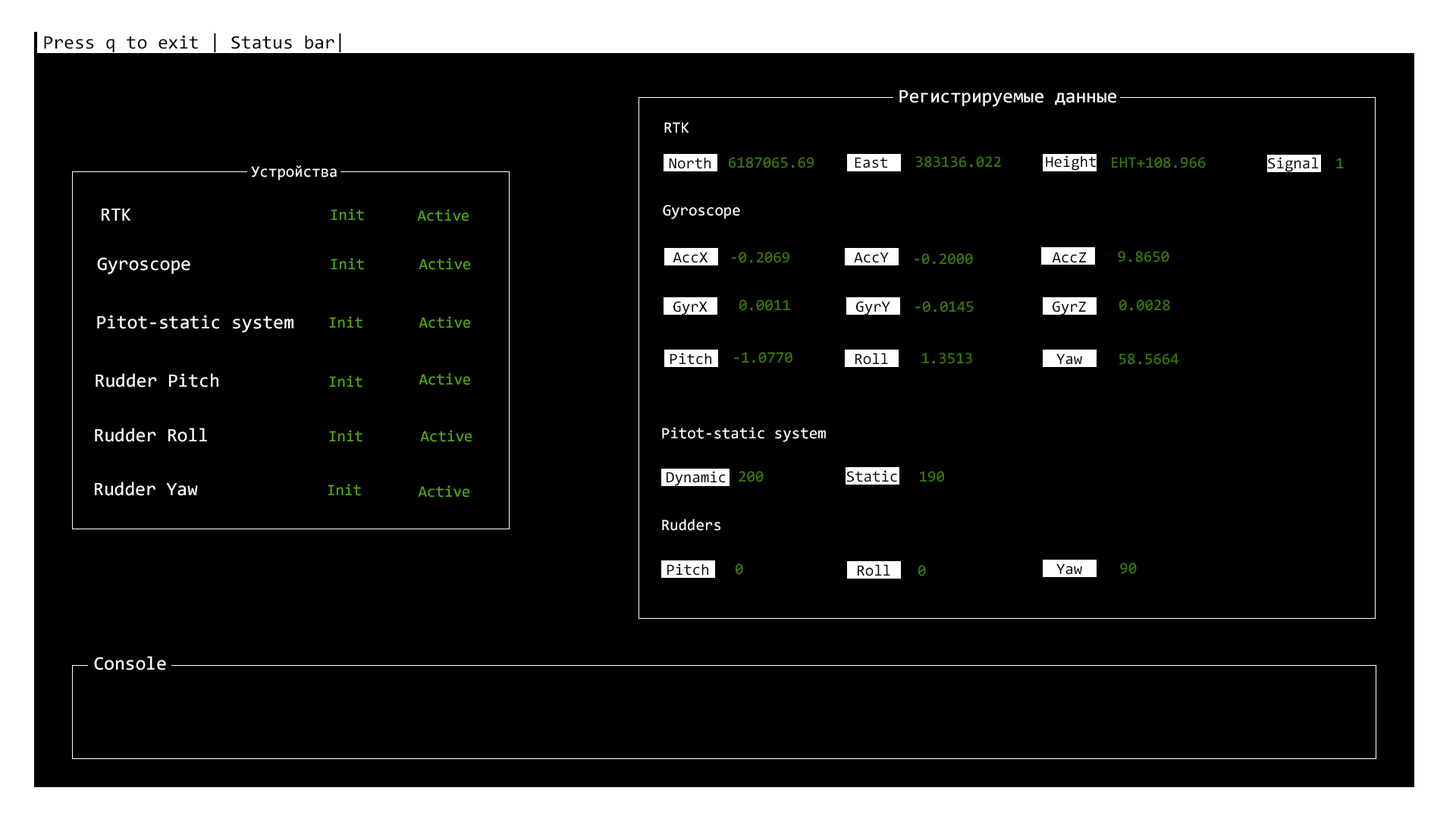
<style>
.page{position:relative;width:1456px;height:819px;background:#000000}
.page>*{position:absolute;margin:0}
.t1{font:19px "Consolas";color:#000000}
.t2{font:19px "Consolas";color:#ffffff}
.t3{font:15.8px "Consolas";color:#ffffff}
.t4{font:15.8px "Consolas";color:#000000}
.t5{font:15.8px "Consolas";color:#397a0a}
.t6{font:15.8px "Consolas";color:#51ac0e}
</style>
<div class="page">
<p class="t1" style="left:44px;top:33px;width:297px;height:19px">Press q to exit | Status bar|</p>
<p class="t2" style="left:899px;top:90px;width:217px;height:17px">Регистрируемые данные</p>
<p class="t3" style="left:664px;top:122px;width:25px;height:11px">RTK</p>
<p class="t4" style="left:669px;top:157px;width:42px;height:12px">North</p>
<p class="t5" style="left:729px;top:157px;width:85px;height:11px">6187065.69</p>
<p class="t4" style="left:855px;top:157px;width:32px;height:11px">East</p>
<p class="t5" style="left:916px;top:156px;width:85px;height:12px">383136.022</p>
<p class="t4" style="left:1046px;top:155px;width:51px;height:16px">Height</p>
<p class="t5" style="left:1112px;top:157px;width:94px;height:11px">EHT+108.966</p>
<p class="t4" style="left:1268px;top:157px;width:51px;height:15px">Signal</p>
<p class="t5" style="left:1336px;top:158px;width:8px;height:10px">1</p>
<p class="t3" style="left:251px;top:165px;width:86px;height:15px">Устройства</p>
<p class="t2" style="left:102px;top:209px;width:29px;height:12px">RTK</p>
<p class="t6" style="left:331px;top:209px;width:33px;height:12px">Init</p>
<p class="t6" style="left:417px;top:209px;width:52px;height:12px">Active</p>
<p class="t3" style="left:663px;top:205px;width:77px;height:14px">Gyroscope</p>
<p class="t2" style="left:97px;top:257px;width:93px;height:18px">Gyroscope</p>
<p class="t6" style="left:331px;top:258px;width:33px;height:12px">Init</p>
<p class="t6" style="left:419px;top:258px;width:51px;height:12px">Active</p>
<p class="t4" style="left:673px;top:252px;width:35px;height:11px">AccX</p>
<p class="t5" style="left:731px;top:252px;width:58px;height:11px">-0.2069</p>
<p class="t4" style="left:854px;top:252px;width:35px;height:11px">AccY</p>
<p class="t5" style="left:915px;top:253px;width:58px;height:12px">-0.2000</p>
<p class="t4" style="left:1052px;top:252px;width:34px;height:11px">AccZ</p>
<p class="t5" style="left:1118px;top:251px;width:51px;height:11px">9.8650</p>
<p class="t4" style="left:673px;top:301px;width:35px;height:14px">GyrX</p>
<p class="t5" style="left:739px;top:300px;width:51px;height:11px">0.0011</p>
<p class="t4" style="left:856px;top:301px;width:34px;height:14px">GyrY</p>
<p class="t5" style="left:915px;top:301px;width:59px;height:11px">-0.0145</p>
<p class="t4" style="left:1053px;top:301px;width:33px;height:14px">GyrZ</p>
<p class="t5" style="left:1119px;top:300px;width:51px;height:11px">0.0028</p>
<p class="t2" style="left:97px;top:315px;width:196px;height:18px">Pitot-static system</p>
<p class="t6" style="left:329px;top:316px;width:33px;height:12px">Init</p>
<p class="t6" style="left:419px;top:316px;width:51px;height:12px">Active</p>
<p class="t4" style="left:670px;top:353px;width:41px;height:12px">Pitch</p>
<p class="t5" style="left:734px;top:352px;width:58px;height:11px">-1.0770</p>
<p class="t4" style="left:855px;top:353px;width:33px;height:12px">Roll</p>
<p class="t5" style="left:921px;top:353px;width:51px;height:11px">1.3513</p>
<p class="t4" style="left:1056px;top:353px;width:26px;height:12px">Yaw</p>
<p class="t5" style="left:1119px;top:353px;width:60px;height:12px">58.5664</p>
<p class="t2" style="left:96px;top:373px;width:122px;height:15px">Rudder Pitch</p>
<p class="t6" style="left:329px;top:375px;width:33px;height:13px">Init</p>
<p class="t6" style="left:419px;top:373px;width:51px;height:12px">Active</p>
<p class="t2" style="left:95px;top:428px;width:112px;height:14px">Rudder Roll</p>
<p class="t6" style="left:329px;top:430px;width:33px;height:12px">Init</p>
<p class="t6" style="left:420px;top:430px;width:52px;height:12px">Active</p>
<p class="t3" style="left:662px;top:427px;width:164px;height:15px">Pitot-static system</p>
<p class="t4" style="left:667px;top:471px;width:59px;height:15px">Dynamic</p>
<p class="t5" style="left:739px;top:471px;width:25px;height:11px">200</p>
<p class="t4" style="left:846px;top:470px;width:51px;height:12px">Static</p>
<p class="t5" style="left:919px;top:471px;width:25px;height:11px">190</p>
<p class="t2" style="left:95px;top:482px;width:103px;height:14px">Rudder Yaw</p>
<p class="t6" style="left:328px;top:484px;width:33px;height:12px">Init</p>
<p class="t6" style="left:418px;top:485px;width:51px;height:12px">Active</p>
<p class="t3" style="left:662px;top:519px;width:58px;height:12px">Rudders</p>
<p class="t4" style="left:667px;top:563px;width:41px;height:13px">Pitch</p>
<p class="t5" style="left:736px;top:563px;width:7px;height:12px">0</p>
<p class="t4" style="left:858px;top:564px;width:32px;height:12px">Roll</p>
<p class="t5" style="left:918px;top:565px;width:8px;height:11px">0</p>
<p class="t4" style="left:1056px;top:563px;width:26px;height:12px">Yaw</p>
<p class="t5" style="left:1120px;top:563px;width:17px;height:11px">90</p>
<p class="t2" style="left:94px;top:656px;width:72px;height:14px">Console</p>
</div>
